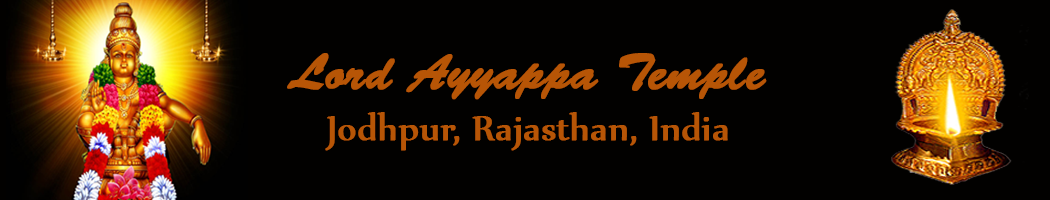
<style>
.page{position:relative;width:1050px;height:200px;background:#020100}
.page>*{position:absolute;margin:0}
.t1{font:50px "BrushScriptStd";color:#b75506;font-weight:bold}
.t2{font:41.7px "Nyala-Regular";color:#b75506;font-weight:bold}
</style>
<div class="page">
<p class="t1" style="left:287px;top:53px;width:480px;height:47px">Lord Ayyappa Temple</p>
<p class="t2" style="left:325px;top:112px;width:403px;height:39px">Jodhpur, Rajasthan, India</p>
</div>
